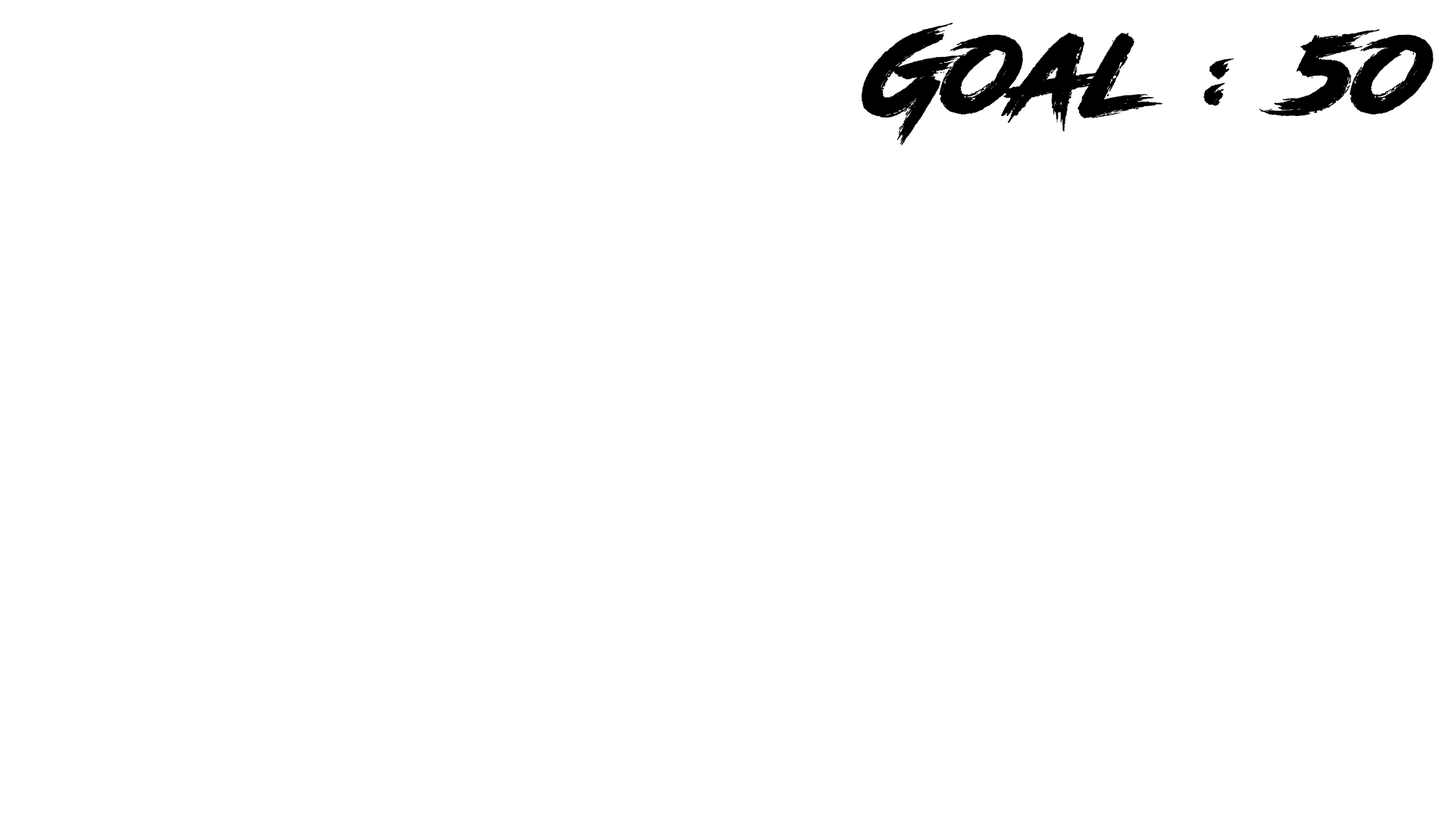
<style>
.page{position:relative;width:1456px;height:819px;background:#ffffff}
.page>*{position:absolute;margin:0}
.t1{font:113.7px "RoadRage";color:#000000}
</style>
<div class="page">
<p class="t1" style="left:861px;top:23px;width:572px;height:123px">Goal : 5o</p>
</div>
